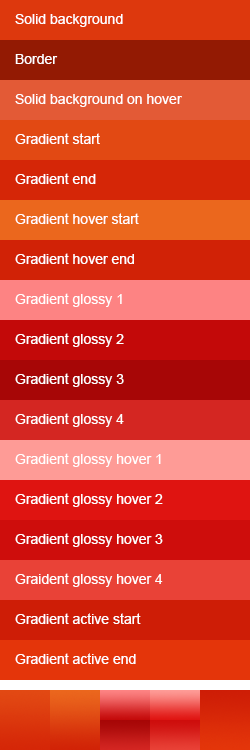
<style>
.page{position:relative;width:250px;height:750px}
.page>*{position:absolute;margin:0}
.t1{font:14px "ArialMT";color:#ffffff}
</style>
<div class="page">
<p class="t1" style="left:15px;top:14px;width:108px;height:13px">Solid background</p>
<p class="t1" style="left:15px;top:54px;width:43px;height:10px">Border</p>
<p class="t1" style="left:15px;top:94px;width:167px;height:13px">Solid background on hover</p>
<p class="t1" style="left:15px;top:133px;width:85px;height:11px">Gradient start</p>
<p class="t1" style="left:15px;top:173px;width:81px;height:11px">Gradient end</p>
<p class="t1" style="left:15px;top:213px;width:124px;height:11px">Gradient hover start</p>
<p class="t1" style="left:15px;top:253px;width:119px;height:11px">Gradient hover end</p>
<p class="t1" style="left:15px;top:293px;width:107px;height:14px">Gradient glossy 1</p>
<p class="t1" style="left:15px;top:333px;width:109px;height:14px">Gradient glossy 2</p>
<p class="t1" style="left:15px;top:373px;width:109px;height:14px">Gradient glossy 3</p>
<p class="t1" style="left:15px;top:413px;width:109px;height:14px">Gradient glossy 4</p>
<p class="t1" style="left:15px;top:453px;width:146px;height:14px">Gradient glossy hover 1</p>
<p class="t1" style="left:15px;top:493px;width:148px;height:14px">Gradient glossy hover 2</p>
<p class="t1" style="left:15px;top:533px;width:148px;height:14px">Gradient glossy hover 3</p>
<p class="t1" style="left:15px;top:573px;width:148px;height:14px">Graident glossy hover 4</p>
<p class="t1" style="left:15px;top:613px;width:126px;height:11px">Gradient active start</p>
<p class="t1" style="left:15px;top:653px;width:121px;height:11px">Gradient active end</p>
</div>
